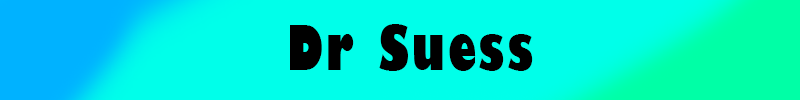
<style>
.page{position:relative;width:800px;height:100px;background:#00ffea}
.page>*{position:absolute;margin:0}
.t1{font:60px "GillSans-UltraBoldCondensed";letter-spacing:0.05em;color:#000000}
.t2{font:60px "MyriadPro-Regular";color:#000000}
</style>
<div class="page">
<p class="t1" style="left:290px;top:24px;width:243px;height:47px"><span class="t2">                     </span>Dr Suess</p>
</div>
